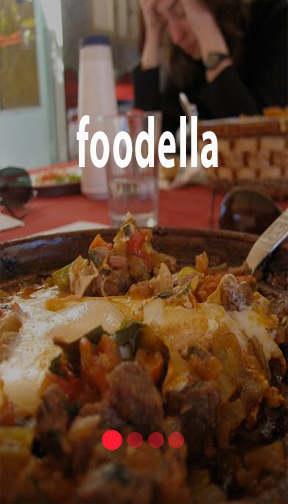
<style>
.page{position:relative;width:288px;height:504px}
.page>*{position:absolute;margin:0}
.t1{font:71.8px "MyriadPro-Bold";letter-spacing:0.025em;color:#fbfbfc;scale:0.52 1}
</style>
<div class="page">
<p class="t1" style="left:76px;top:115px;width:142px;height:53px">foodella</p>
</div>
